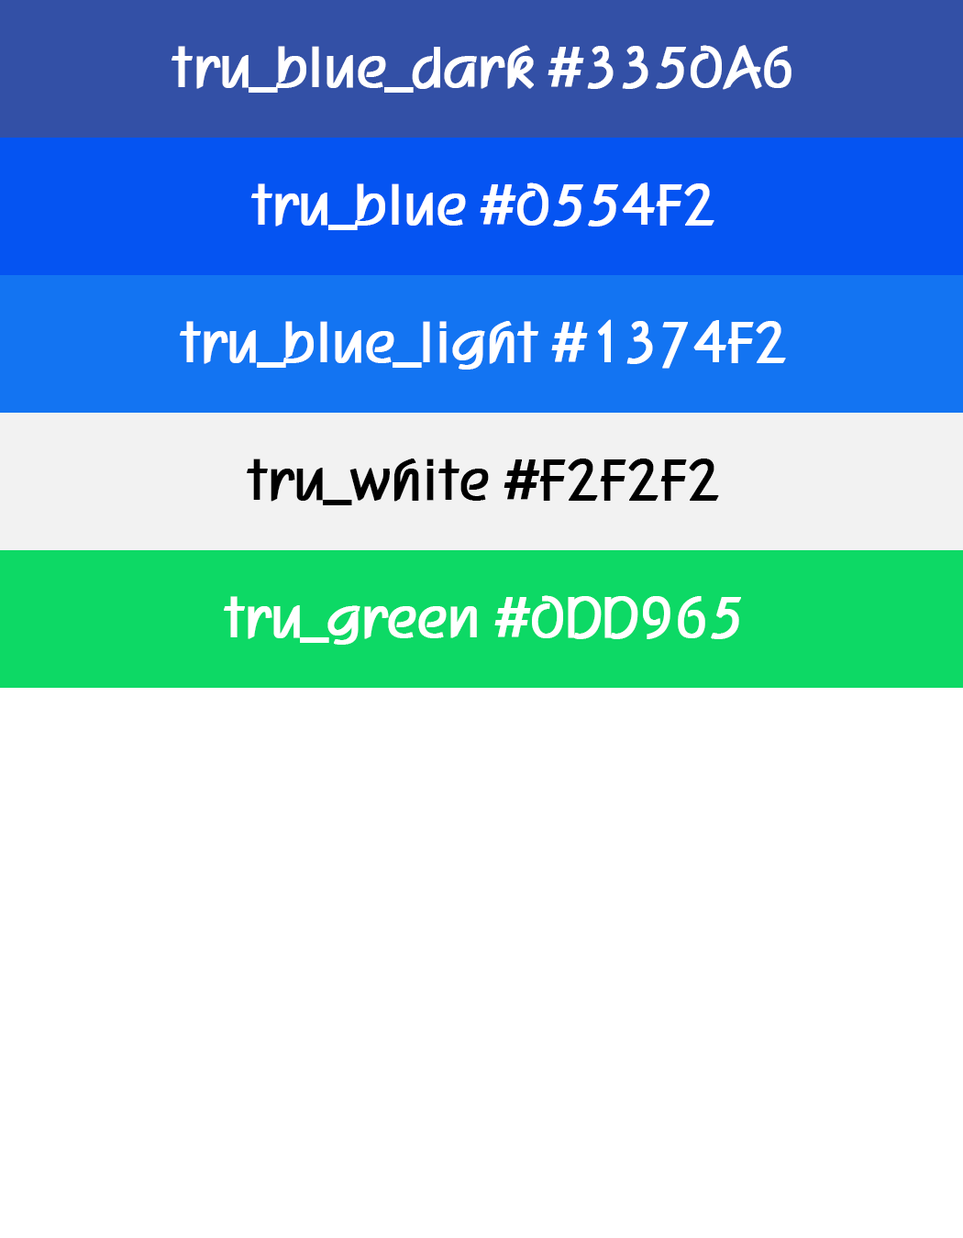
<style>
.page{position:relative;width:963px;height:1238px;background:#ffffff}
.page>*{position:absolute;margin:0}
.t1{font:55px "H2porM";letter-spacing:-0.1em;color:#ffffff;font-weight:bold}
.t2{font:55px "H2porM";letter-spacing:-0.1em;color:#000000;font-weight:bold}
</style>
<div class="page">
<p class="t1" style="left:172px;top:45px;width:620px;height:48px">tru_blue_dark #3350A6</p>
<p class="t1" style="left:251px;top:183px;width:463px;height:47px">tru_blue #0554F2</p>
<p class="t1" style="left:180px;top:319px;width:606px;height:51px">tru_blue_light #1374F2</p>
<p class="t2" style="left:247px;top:459px;width:472px;height:46px">tru_white #F2F2F2</p>
<p class="t1" style="left:224px;top:595px;width:517px;height:50px">tru_green #0DD965</p>
</div>
